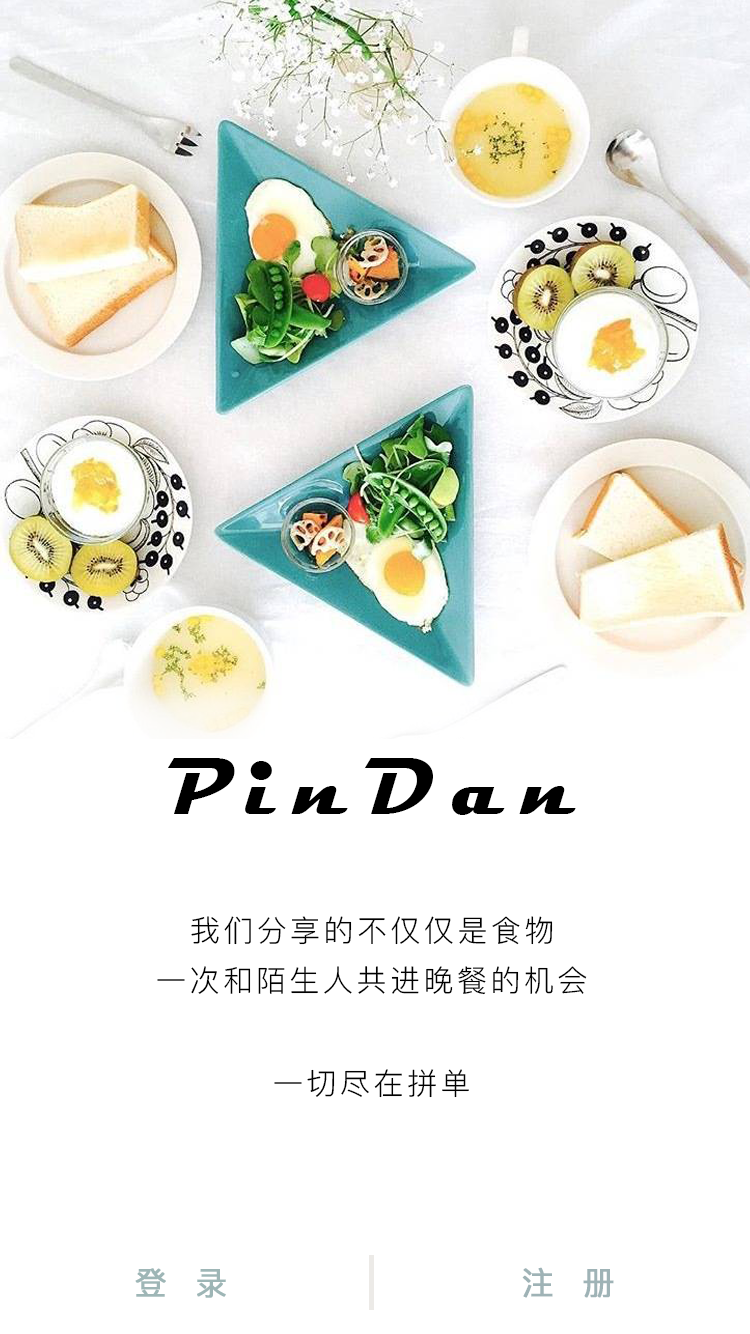
<style>
.page{position:relative;width:750px;height:1334px;background:#ffffff}
.page>*{position:absolute;margin:0}
.t1{font:81.5px "Magneto-Bold";letter-spacing:0.214em;color:#000000}
.t2{font:81.5px "Magneto-Bold";letter-spacing:0.214em;color:#112030}
.t3{font:30px "PingFang-SC-Regular";letter-spacing:0.116em;color:#010101}
.t4{font:30px "PingFang-SC-Regular";letter-spacing:0.116em;color:#000000}
.t5{font:32px "PingFang-SC-Medium";letter-spacing:0.872em;color:#9eb6b6;font-weight:bold}
.t6{font:32px "PingFang-SC-Medium";letter-spacing:0.872em;color:#9fb3b6;font-weight:bold}
</style>
<div class="page">
<p class="t1" style="left:168px;top:758px;width:408px;height:57px"><span class="t2"> </span>  PinDan</p>
<p class="t3" style="left:191px;top:916px;width:362px;height:29px">我们分享的不仅仅是食物</p>
<p class="t4" style="left:157px;top:966px;width:430px;height:29px">一次和陌生人共进晚餐的机会</p>
<p class="t4" style="left:274px;top:1069px;width:195px;height:29px">一切尽在拼单</p>
<p class="t5" style="left:135px;top:1268px;width:91px;height:30px">登录</p>
<p class="t6" style="left:522px;top:1267px;width:92px;height:31px">注册</p>
</div>
